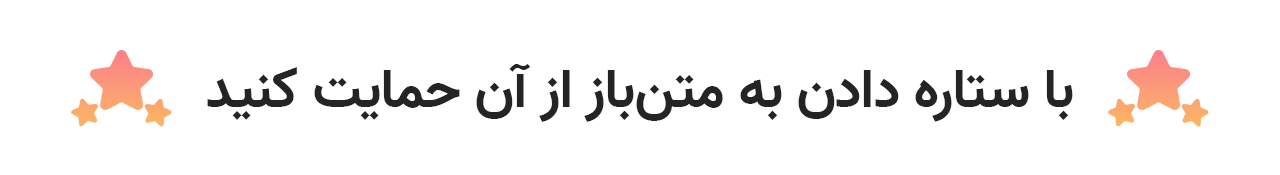
<style>
.page{position:relative;width:1280px;height:175px;background:#ffffff}
.page>*{position:absolute;margin:0}
.t1{font:54.7px "Vazir-Bold";color:#242424}
</style>
<div class="page">
<p class="t1" style="left:207px;top:64px;width:866px;height:58px">با ستاره دادن به متن‌باز از آن حمایت کنید</p>
</div>
